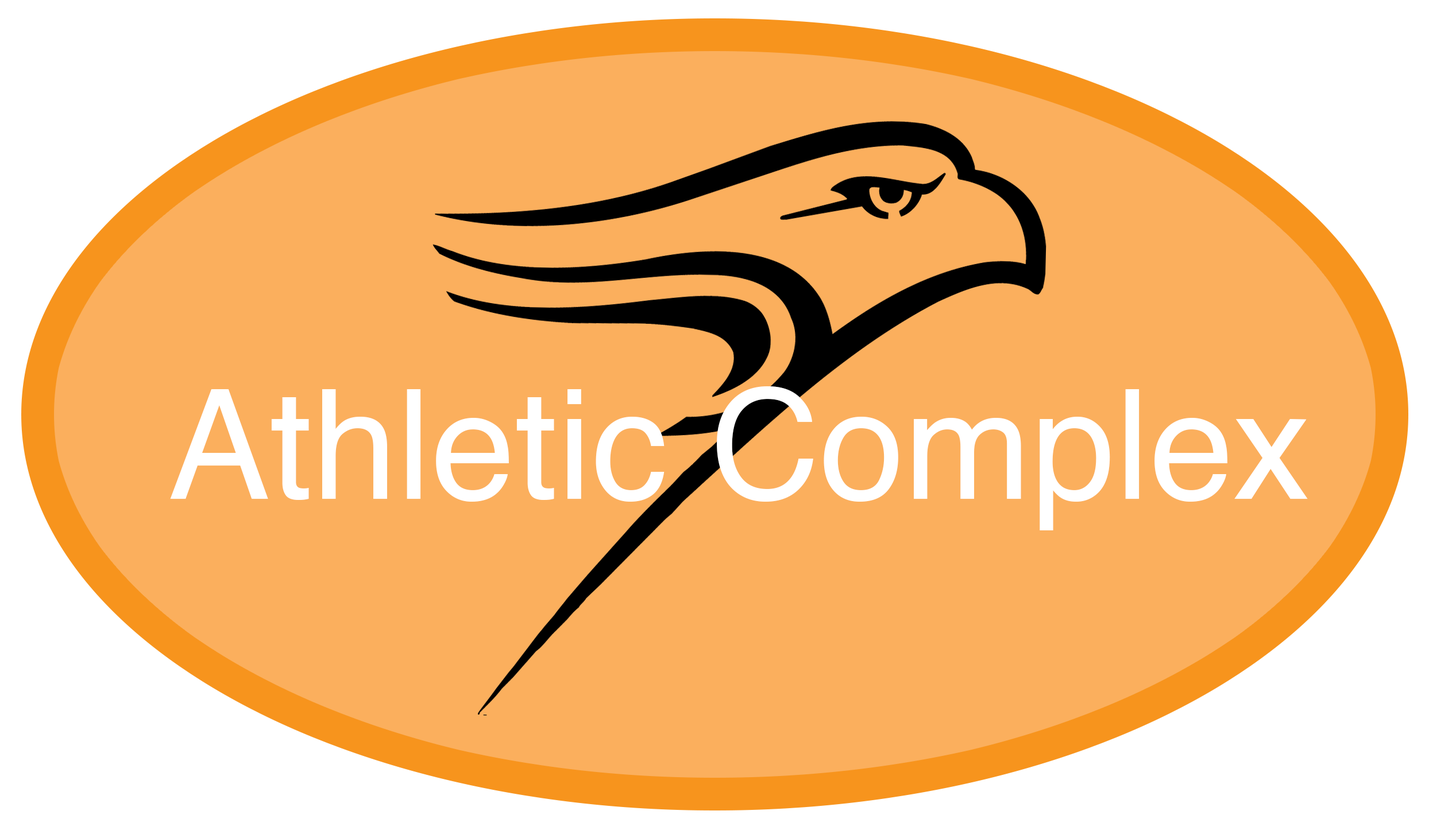
<style>
.page{position:relative;width:1429px;height:834px;background:#fbaf5d}
.page>*{position:absolute;margin:0}
.t1{font:151.9px "Helvetica";color:#ffffff}
</style>
<div class="page">
<p class="t1" style="left:170px;top:387px;width:1138px;height:144px">Athletic Complex</p>
</div>
